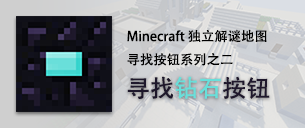
<style>
.page{position:relative;width:305px;height:128px}
.page>*{position:absolute;margin:0}
.t1{font:13.3px "AdobeHeitiStd-Regular";color:#000000}
.t2{font:24px "AdobeHeitiStd-Regular";color:#1e182b}
.t3{font:24px "AdobeHeitiStd-Regular";color:#69dfda}
.t4{font:24px "AdobeHeitiStd-Regular";color:#1f182c}
</style>
<div class="page">
<p class="t1" style="left:127px;top:29px;width:140px;height:37px">Minecraft 独立解谜地图<br>寻找按钮系列之二</p>
<p class="t2" style="left:127px;top:76px;width:143px;height:23px">寻找<span class="t3">钻石</span><span class="t4">按钮</span></p>
</div>
